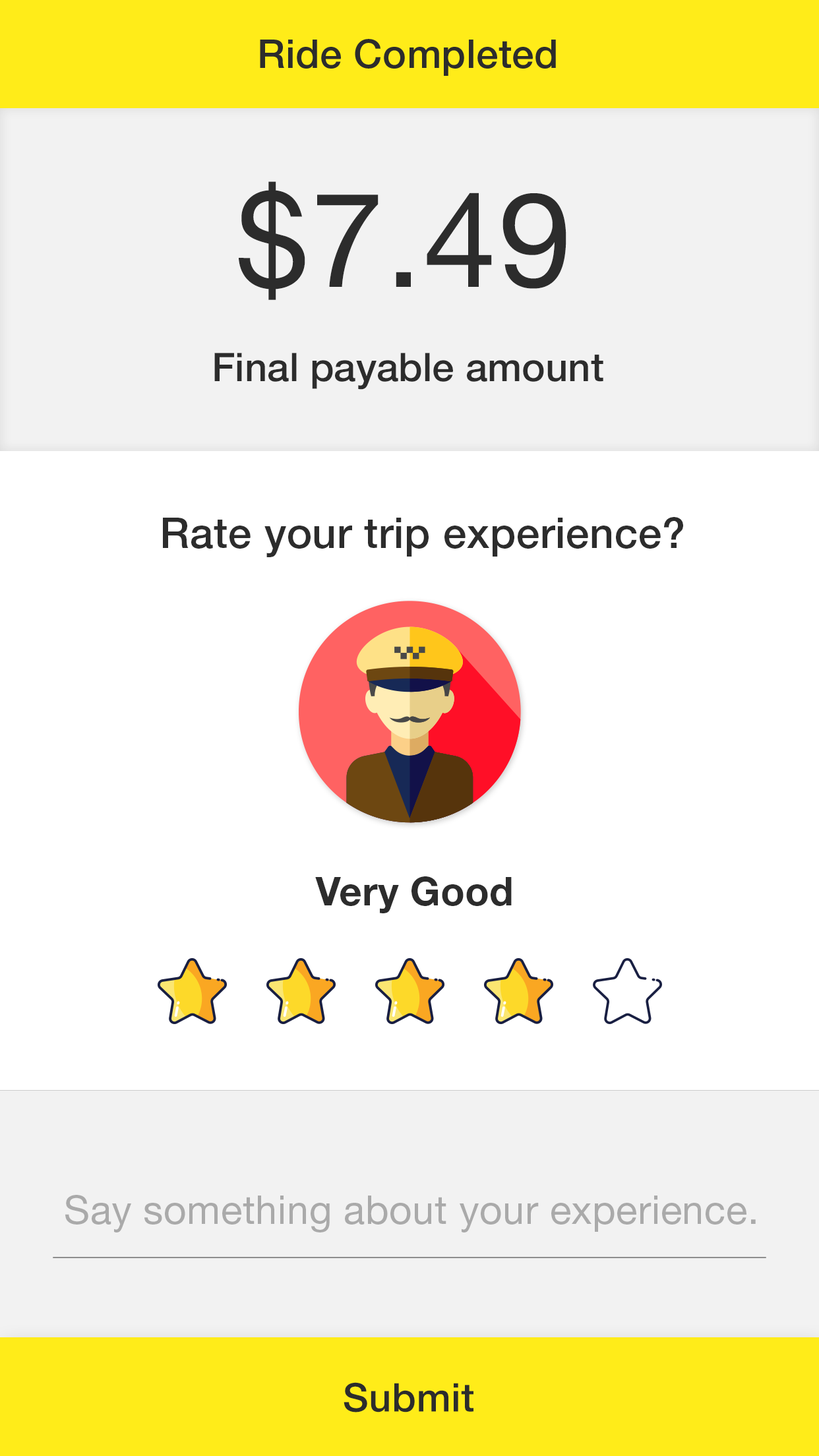
<style>
.page{position:relative;width:819px;height:1456px;background:#ffffff}
.page>*{position:absolute;margin:0}
.t1{font:39.6px "HelveticaNeueLTStd-Md";letter-spacing:0.01em;color:#2c2c2c}
.t2{font:132.2px "HelveticaNeueLTStd-Roman";letter-spacing:0.01em;color:#2c2c2c}
.t3{font:39.6px "HelveticaNeueLTStd-Md";color:#2c2c2c}
.t4{font:42.2px "HelveticaNeueLTStd-Md";letter-spacing:0.01em;color:#2c2c2c}
.t5{font:39.6px "HelveticaNeueLTStd-Bd";letter-spacing:0.01em;color:#2c2c2c}
.t6{font:39.6px "HelveticaNeueLTStd-Roman";letter-spacing:0.01em;color:#aaaaaa}
</style>
<div class="page">
<p class="t1" style="left:260px;top:39px;width:296px;height:37px">Ride Completed</p>
<p class="t2" style="left:239px;top:181px;width:327px;height:119px">$7.49</p>
<p class="t3" style="left:214px;top:353px;width:389px;height:37px">Final payable amount</p>
<p class="t4" style="left:163px;top:517px;width:520px;height:40px">Rate your trip experience?</p>
<p class="t5" style="left:315px;top:876px;width:197px;height:37px">Very Good</p>
<p class="t6" style="left:65px;top:1195px;width:691px;height:37px">Say something about your experience.</p>
<p class="t1" style="left:344px;top:1382px;width:129px;height:30px">Submit</p>
</div>
